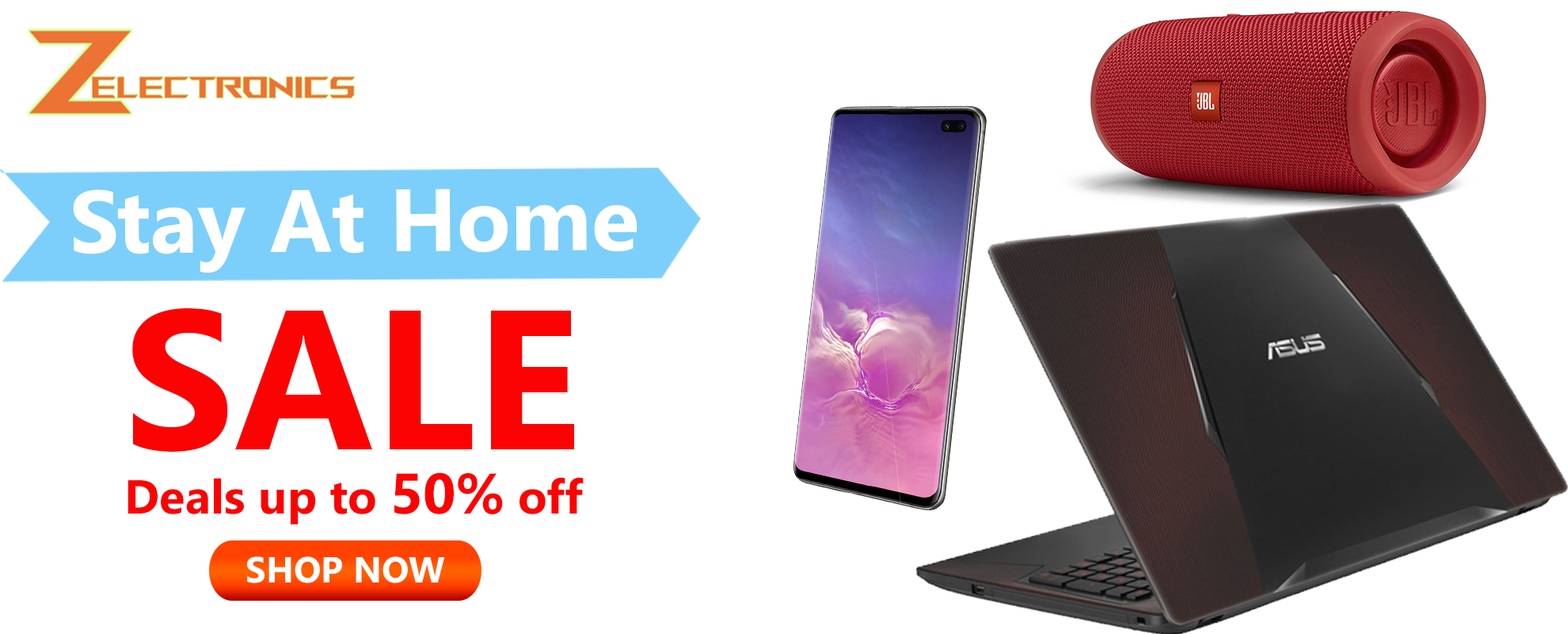
<style>
.page{position:relative;width:1568px;height:634px;background:#ffffff}
.page>*{position:absolute;margin:0}
.t1{font:88.1px "NirmalaUI-Bold";color:#ffffff}
.t2{font:197.7px "NirmalaUI-Bold";color:#fb0303}
.t3{font:47.6px "NirmalaUI-Bold";color:#fb0303}
.t4{font:57px "NirmalaUI-Bold";color:#fb0303}
.t5{font:36.2px "NirmalaUI-Bold";color:#ffffff}
</style>
<div class="page">
<p class="t1" style="left:73px;top:188px;width:564px;height:85px">Stay At Home</p>
<p class="t2" style="left:132px;top:307px;width:442px;height:144px">SALE</p>
<p class="t3" style="left:127px;top:472px;width:457px;height:52px">Deals up to <span class="t4">50%</span> off</p>
<p class="t5" style="left:247px;top:556px;width:198px;height:27px">SHOP NOW</p>
</div>
